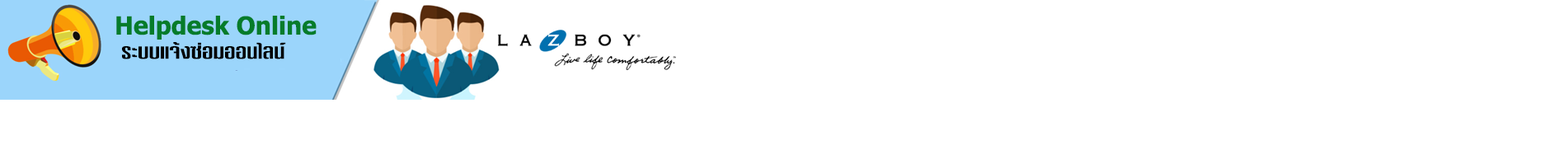
<style>
.page{position:relative;width:1568px;height:141px;background:#ffffff}
.page>*{position:absolute;margin:0}
.t1{font:24.7px "Tahoma-Bold";color:#067c2a}
.t2{font:21.5px "DSNPatPongExtend";color:#000000}
</style>
<div class="page">
<p class="t1" style="left:116px;top:16px;width:201px;height:24px">Helpdesk Online</p>
<p class="t2" style="left:122px;top:42px;width:164px;height:17px">ระบบแจ้งซ่อมออนไลน์</p>
</div>
